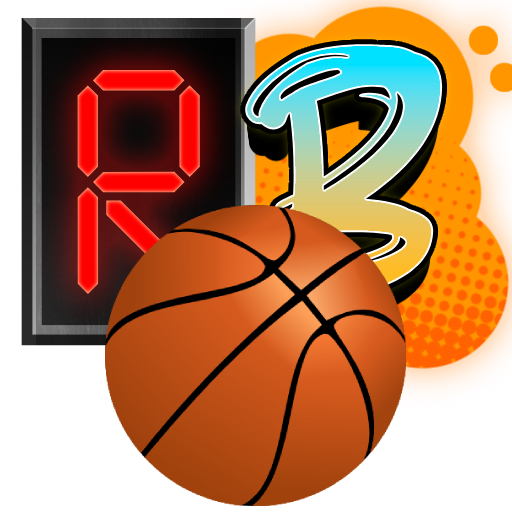
<style>
.page{position:relative;width:512px;height:512px;background:#ffffff}
.page>*{position:absolute;margin:0}
.t1{font:262.2px "aAttackGraffitiRegular"}
.t2{font:319.7px "SevenSegmentRegular";color:#ff0000}
</style>
<div class="page">
<p class="t1" style="left:245px;top:40px;width:198px;height:256px">B</p>
<p class="t2" style="left:77px;top:70px;width:123px;height:224px">r</p>
</div>
